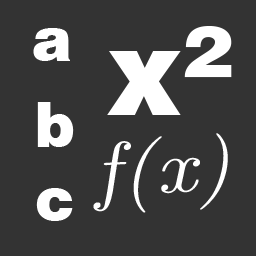
<style>
.page{position:relative;width:256px;height:256px;background:#333333}
.page>*{position:absolute;margin:0}
.t1{font:60px "HelveticaBlack";color:#ffffff}
.t2{font:120px "HelveticaBlack";color:#ffffff}
.t3{font:75.6px "CMUClassicalSerif-Italic";color:#ffffff;scale:1.15 1}
</style>
<div class="page">
<p class="t1" style="left:33px;top:28px;width:37px;height:33px">a</p>
<p class="t2" style="left:107px;top:26px;width:125px;height:89px">x²</p>
<p class="t1" style="left:37px;top:102px;width:37px;height:45px">b</p>
<p class="t3" style="left:93px;top:133px;width:135px;height:80px;rotate:-3deg">f(x)</p>
<p class="t1" style="left:36px;top:188px;width:37px;height:33px">c</p>
</div>
